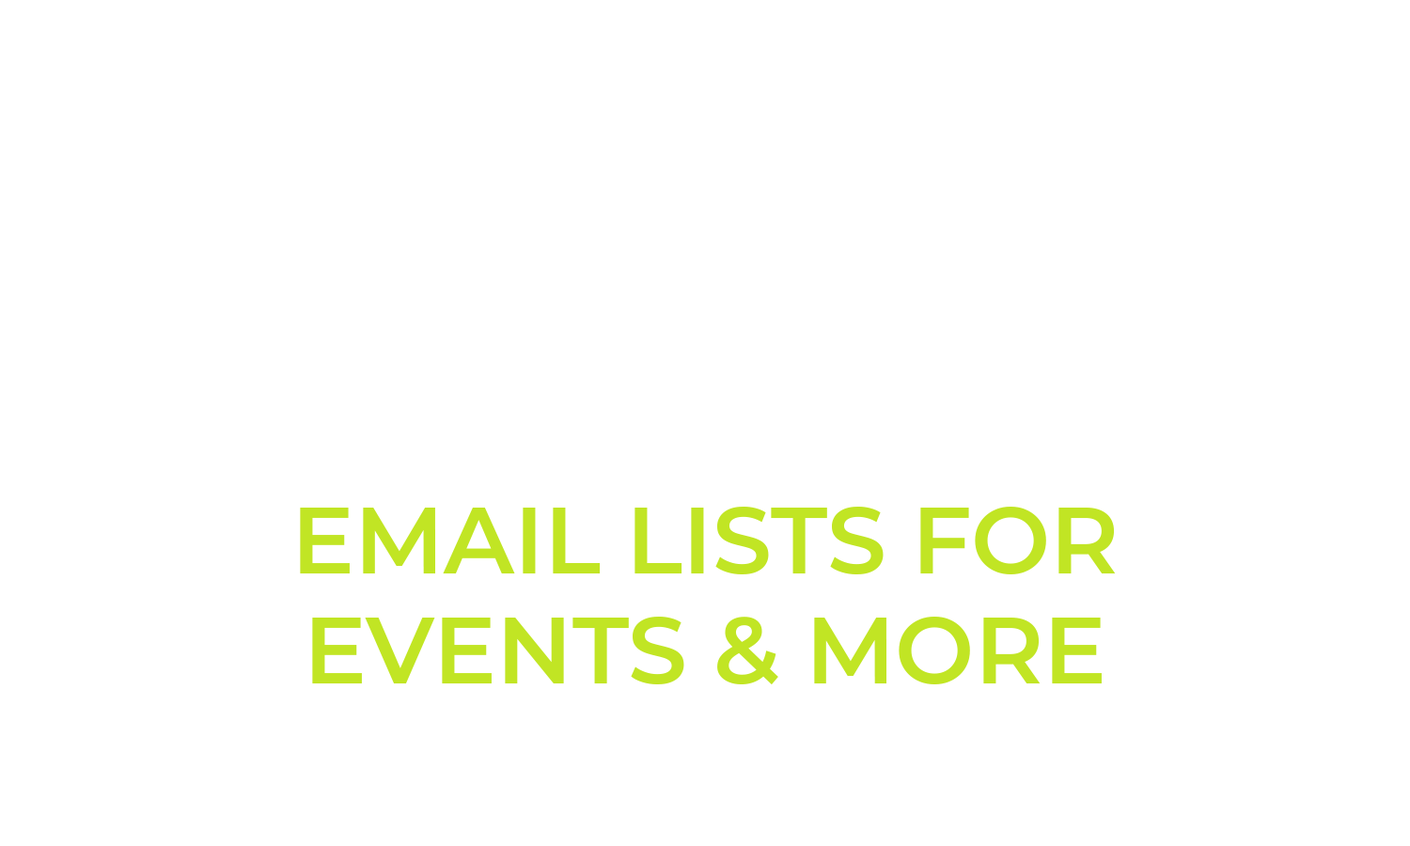
<style>
.page{position:relative;width:1410px;height:846px;background:#ffffff}
.page>*{position:absolute;margin:0}
.t1{font:94px/0.2px "Montserrat-SemiBold";color:#c1e524;text-transform:uppercase}
</style>
<div class="page">
<p class="t1" style="left:300px;top:507px;width:816px;height:178px;text-align:center">Email LISTS FOR<br>EVENTS &amp; MORE</p>
</div>
